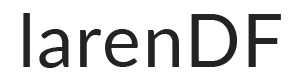
<style>
.page{position:relative;width:300px;height:73px;background:#ffffff}
.page>*{position:absolute;margin:0}
.t1{font:73px "Lato-Regular";letter-spacing:0.025em;color:#242222}
</style>
<div class="page">
<p class="t1" style="left:23px;top:13px;width:258px;height:55px">larenDF</p>
</div>
